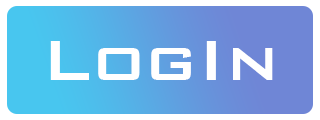
<style>
.page{position:relative;width:320px;height:120px;background:#ffffff}
.page>*{position:absolute;margin:0}
.t1{font:75px "BankGothicBT-Medium";color:#ffffff}
</style>
<div class="page">
<p class="t1" style="left:50px;top:41px;width:223px;height:39px">LogIn</p>
</div>
